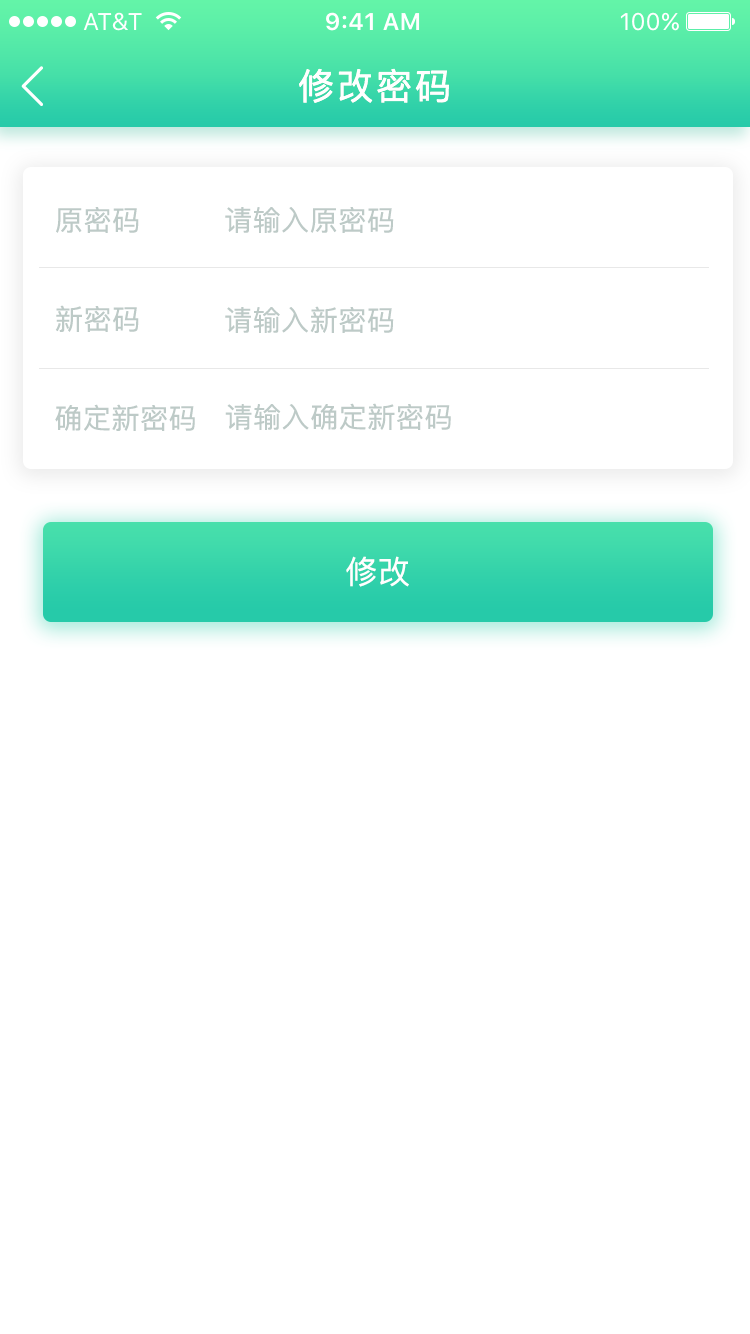
<style>
.page{position:relative;width:750px;height:1334px;background:#ffffff}
.page>*{position:absolute;margin:0}
.t1{font:36px "PingFangSC-Regular";letter-spacing:0.08em;color:#ffffff}
.t2{font:28px "PingFangSC-Regular";letter-spacing:0.02em;color:#bdcac7}
.t3{font:32px "PingFangSC-Regular";letter-spacing:0.02em;color:#ffffff}
</style>
<div class="page">
<p class="t1" style="left:299px;top:68px;width:150px;height:35px">修改密码</p>
<p class="t2" style="left:56px;top:207px;width:83px;height:26px">原密码</p>
<p class="t2" style="left:225px;top:207px;width:169px;height:26px">请输入原密码</p>
<p class="t2" style="left:55px;top:305px;width:84px;height:27px">新密码</p>
<p class="t2" style="left:225px;top:306px;width:169px;height:27px">请输入新密码</p>
<p class="t2" style="left:55px;top:404px;width:140px;height:27px">确定新密码</p>
<p class="t2" style="left:225px;top:403px;width:226px;height:27px">请输入确定新密码</p>
<p class="t3" style="left:346px;top:556px;width:63px;height:31px">修改</p>
</div>
